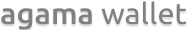
<style>
.page{position:relative;width:187px;height:30px;background:#ffffff}
.page>*{position:absolute;margin:0}
.t1{font:14.7px "Ubuntu-Regular";color:#808080;scale:1.04 1}
.t2{font:14.7px "Ubuntu-Medium";color:#808080;scale:1.04 1}
</style>
<div class="page">
<p class="t1" style="left:1px;top:1px;width:186px;height:29px"><span class="t2">agama</span> wallet</p>
</div>
